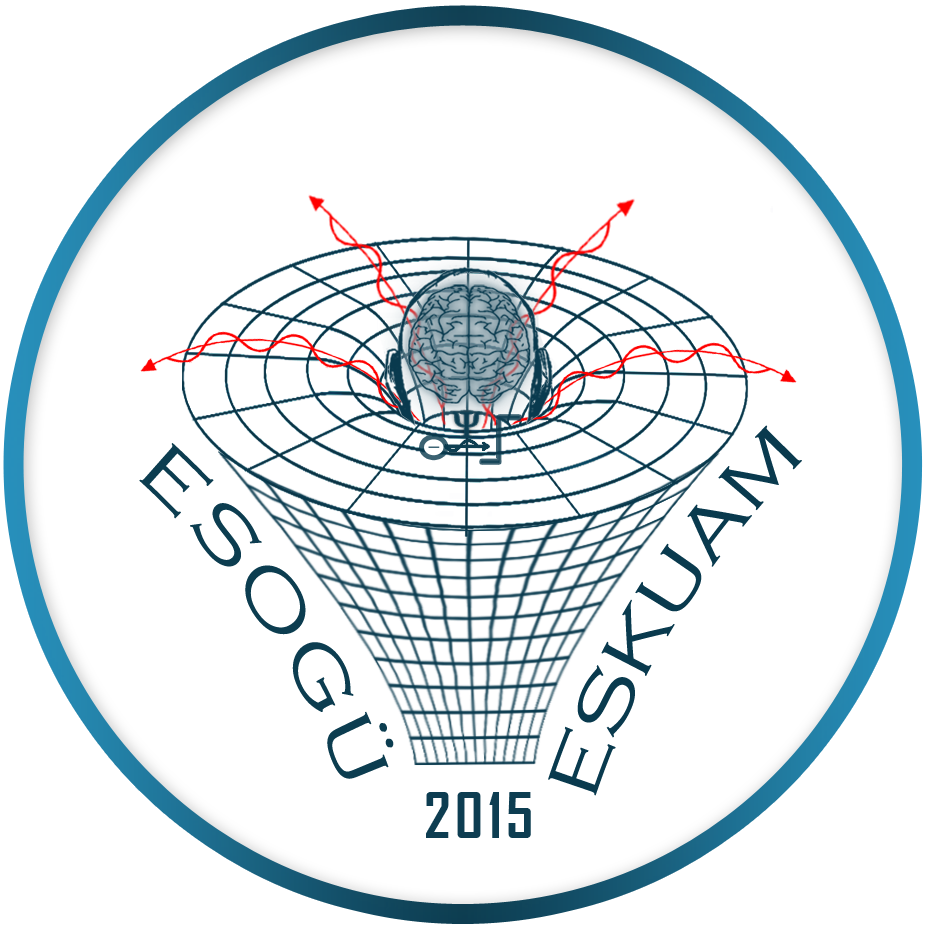
<style>
.page{position:relative;width:928px;height:928px;background:#ffffff}
.page>*{position:absolute;margin:0}
.t1{font:75px "CopperplateGothic-Light";color:#093a4e}
.t2{font:75px "CopperplateGothic-Light";letter-spacing:0.075em;color:#093a4e}
.t3{font:60px "AgencyFB-Bold";letter-spacing:0.075em;color:#093a4e}
</style>
<div class="page">
<p class="t1" style="left:548px;top:425px;width:254px;height:371px;rotate:-54deg">ESKUAM</p>
<p class="t2" style="left:139px;top:443px;width:255px;height:336px;rotate:60deg">ESOGÜ</p>
<p class="t3" style="left:426px;top:792px;width:105px;height:46px">2015</p>
</div>
